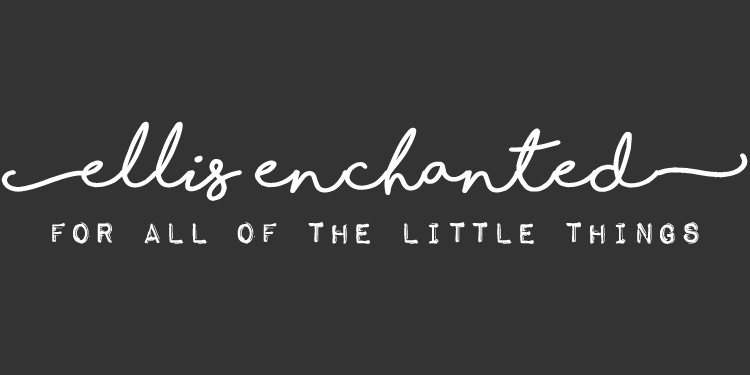
<style>
.page{position:relative;width:750px;height:375px;background:#333333}
.page>*{position:absolute;margin:0}
.t1{font:62.5px "ShorelinesScriptBold";color:#ffffff;font-weight:bold}
.t2{font:37.5px "ImpactLabelReversed";color:#ffffff;font-weight:bold}
</style>
<div class="page">
<p class="t1" style="left:1px;top:121px;width:747px;height:80px">[ellis enchanted]</p>
<p class="t2" style="left:52px;top:222px;width:647px;height:22px">FOR ALL OF THE LITTLE THINGS</p>
</div>
